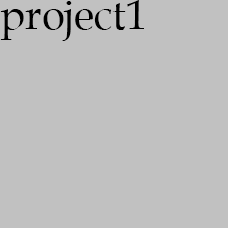
<style>
.page{position:relative;width:228px;height:228px;background:#c1c1c1}
.page>*{position:absolute;margin:0}
.t1{font:41.7px "BookAntiqua";color:#000000}
</style>
<div class="page">
<p class="t1" style="left:0px;top:0px;width:144px;height:41px">project1</p>
</div>
